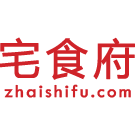
<style>
.page{position:relative;width:136px;height:136px;background:#ffffff}
.page>*{position:absolute;margin:0}
.t1{font:42.4px "MicrosoftYaHei";letter-spacing:0.1em;color:#cf2329;font-weight:bold}
.t2{font:19px "TwCenMT-Regular";letter-spacing:0.1em;color:#cf2329;font-weight:bold}
</style>
<div class="page">
<p class="t1" style="left:0px;top:37px;width:135px;height:43px">宅食府</p>
<p class="t2" style="left:4px;top:84px;width:127px;height:14px">zhaishifu.com</p>
</div>
